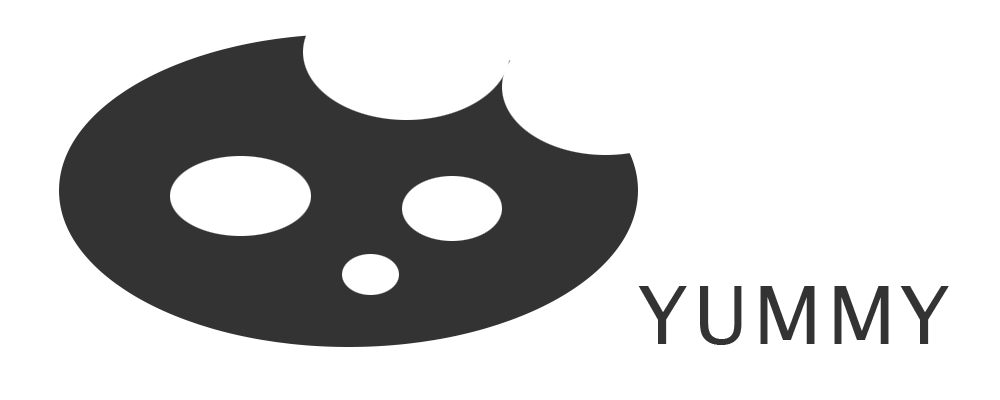
<style>
.page{position:relative;width:1000px;height:400px;background:#ffffff}
.page>*{position:absolute;margin:0}
.t1{font:80px "LucidaSans";letter-spacing:0.06em;color:#333333}
</style>
<div class="page">
<p class="t1" style="left:638px;top:286px;width:311px;height:59px">YUMMY</p>
</div>
